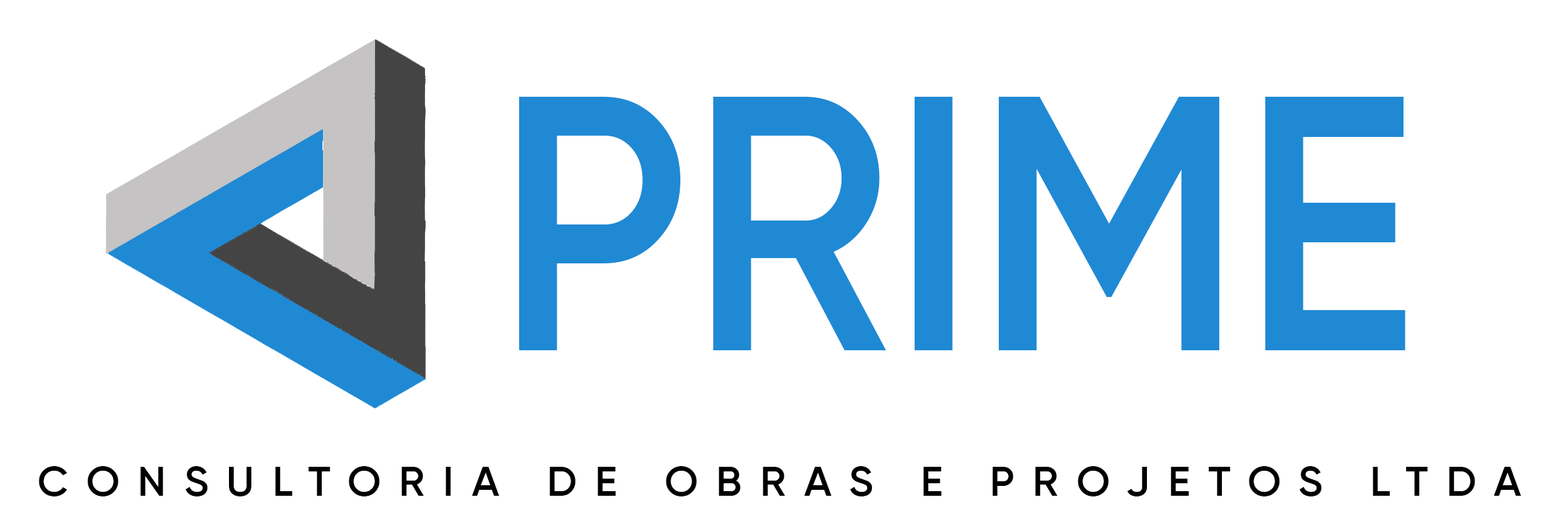
<style>
.page{position:relative;width:1568px;height:530px;background:#ffffff}
.page>*{position:absolute;margin:0}
.t1{font:361.9px "Gilroy-SemiBold";color:#1f89d4;scale:0.91 1}
.t2{font:41.7px "Gilroy-SemiBold";letter-spacing:0.44em;color:#000000}
</style>
<div class="page">
<p class="t1" style="left:519px;top:96px;width:886px;height:254px">PRIME</p>
<p class="t2" style="left:39px;top:466px;width:1482px;height:30px">CONSULTORIA DE OBRAS E PROJETOS LTDA</p>
</div>
